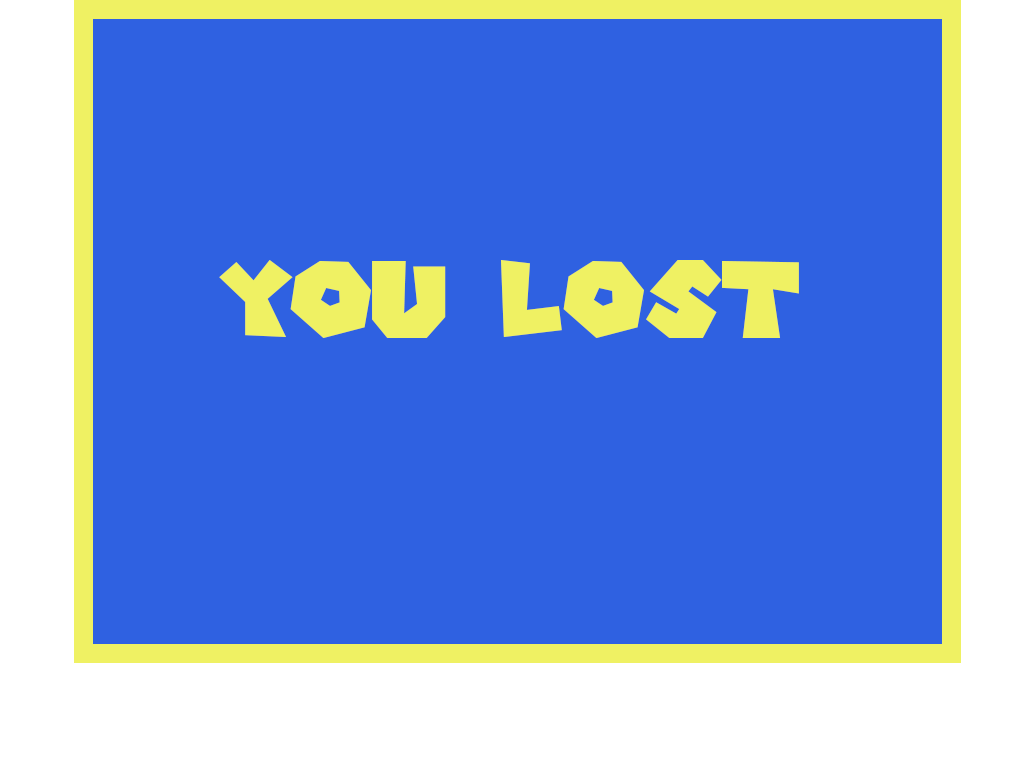
<style>
.page{position:relative;width:1035px;height:775px;background:#2f61e1}
.page>*{position:absolute;margin:0}
.t1{font:104.2px "SuperMarioGalaxy";color:#eff163}
</style>
<div class="page">
<p class="t1" style="left:219px;top:260px;width:580px;height:78px">You LOST</p>
</div>
